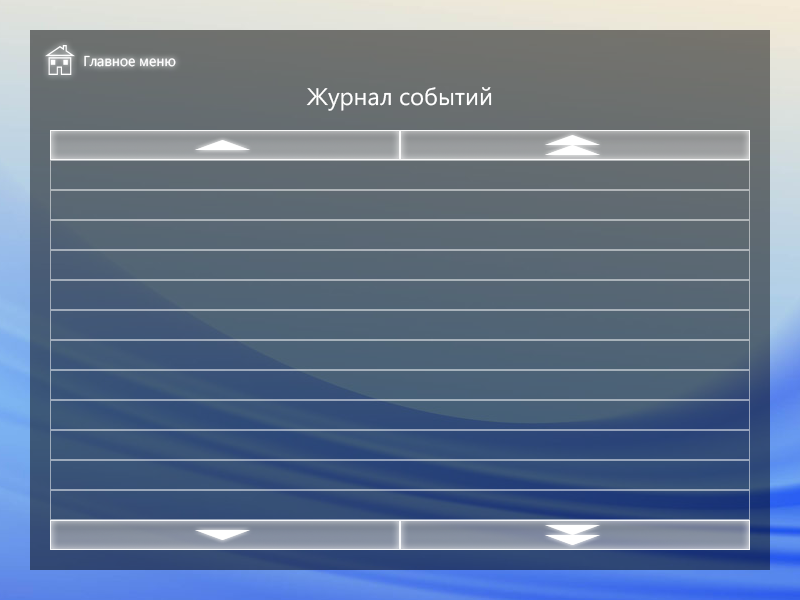
<style>
.page{position:relative;width:800px;height:600px}
.page>*{position:absolute;margin:0}
.t1{font:14.2px "SegoeUI";color:#ffffff}
.t2{font:23.9px "SegoeUI";color:#ffffff}
</style>
<div class="page">
<p class="t1" style="left:84px;top:55px;width:92px;height:12px">Главное меню</p>
<p class="t2" style="left:306px;top:87px;width:186px;height:24px">Журнал событий</p>
</div>
